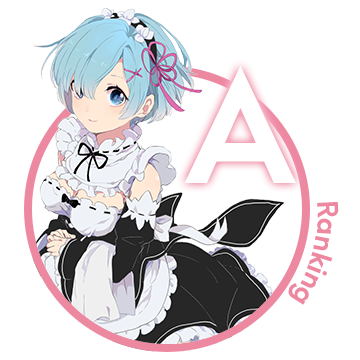
<style>
.page{position:relative;width:360px;height:360px;background:#ffffff}
.page>*{position:absolute;margin:0}
.t1{font:150.6px "HKExplorerSharp-SemiBold";letter-spacing:-0.035em;color:#ffffff}
.t2{font:27.6px "HKExplorerSharp-SemiBold";letter-spacing:-0.035em;color:#ed88a1}
</style>
<div class="page">
<p class="t1" style="left:184px;top:65px;width:112px;height:118px">A</p>
<p class="t2" style="left:288px;top:202px;width:51px;height:103px;rotate:-21deg">Ranking</p>
</div>
